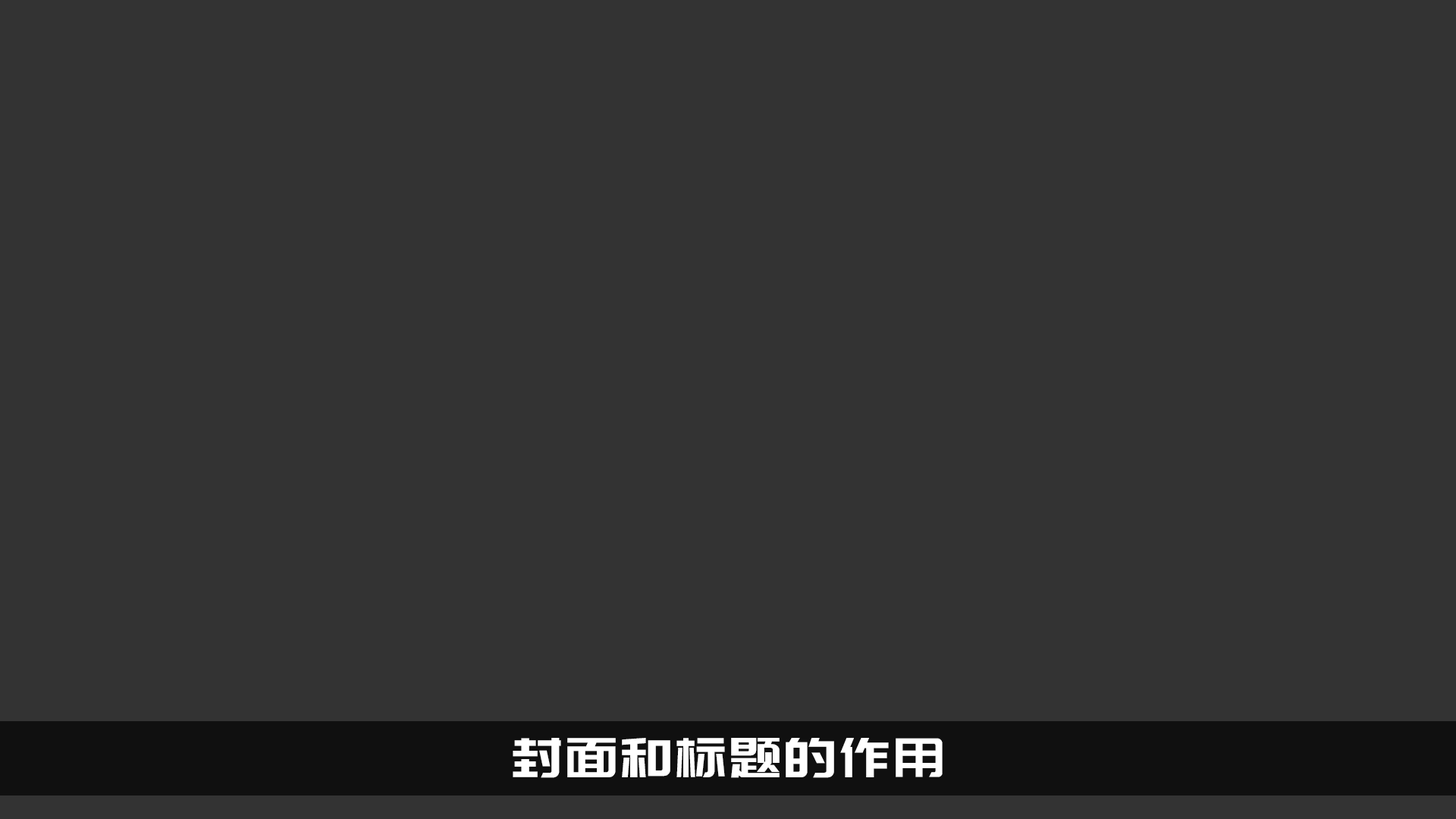
<style>
.page{position:relative;width:1456px;height:819px;background:#333333}
.page>*{position:absolute;margin:0}
.t1{font:54.6px "PangMenZhengDao-3";color:#ffffff}
</style>
<div class="page">
<p class="t1" style="left:513px;top:738px;width:430px;height:40px">封面和标题的作用</p>
</div>
